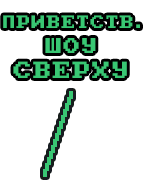
<style>
.page{position:relative;width:144px;height:180px;background:#ffffff}
.page>*{position:absolute;margin:0}
.t1{font:14.2px "PxPlus_IBM_BIOS";letter-spacing:0.075em;color:#39c773}
.t2{font:17px "PxPlus_IBM_BIOS";letter-spacing:0.075em;color:#39c773}
.t3{font:18.6px "PxPlus_IBM_BIOS";letter-spacing:0.075em;color:#39c773}
</style>
<div class="page">
<p class="t1" style="left:3px;top:15px;width:137px;height:13px">ПРИВЕТСТВ.</p>
<p class="t2" style="left:45px;top:38px;width:51px;height:15px">ШОУ</p>
<p class="t3" style="left:13px;top:61px;width:114px;height:17px">СВЕРХУ</p>
</div>
